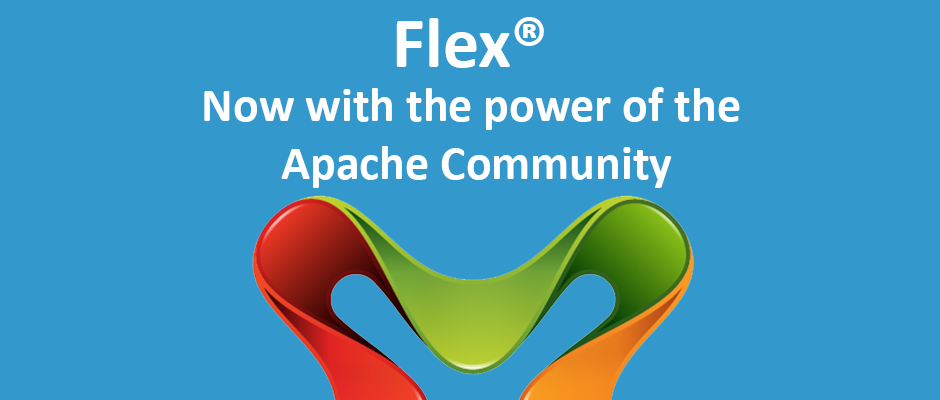
<style>
.page{position:relative;width:940px;height:400px;background:#3399cc}
.page>*{position:absolute;margin:0}
.t1{font:72px "Calibri-Bold";color:#ffffff}
.t2{font:48px "Calibri-Bold";color:#ffffff}
</style>
<div class="page">
<p class="t1" style="left:396px;top:17px;width:148px;height:51px">Flex®</p>
<p class="t2" style="left:204px;top:87px;width:536px;height:101px;text-align:center">Now with the power of the<br> Apache Community</p>
</div>
